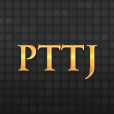
<style>
.page{position:relative;width:114px;height:114px}
.page>*{position:absolute;margin:0}
.t1{font:33.2px "TrajanPro-Bold"}
</style>
<div class="page">
<p class="t1" style="left:17px;top:44px;width:81px;height:35px">PTTJ</p>
</div>
